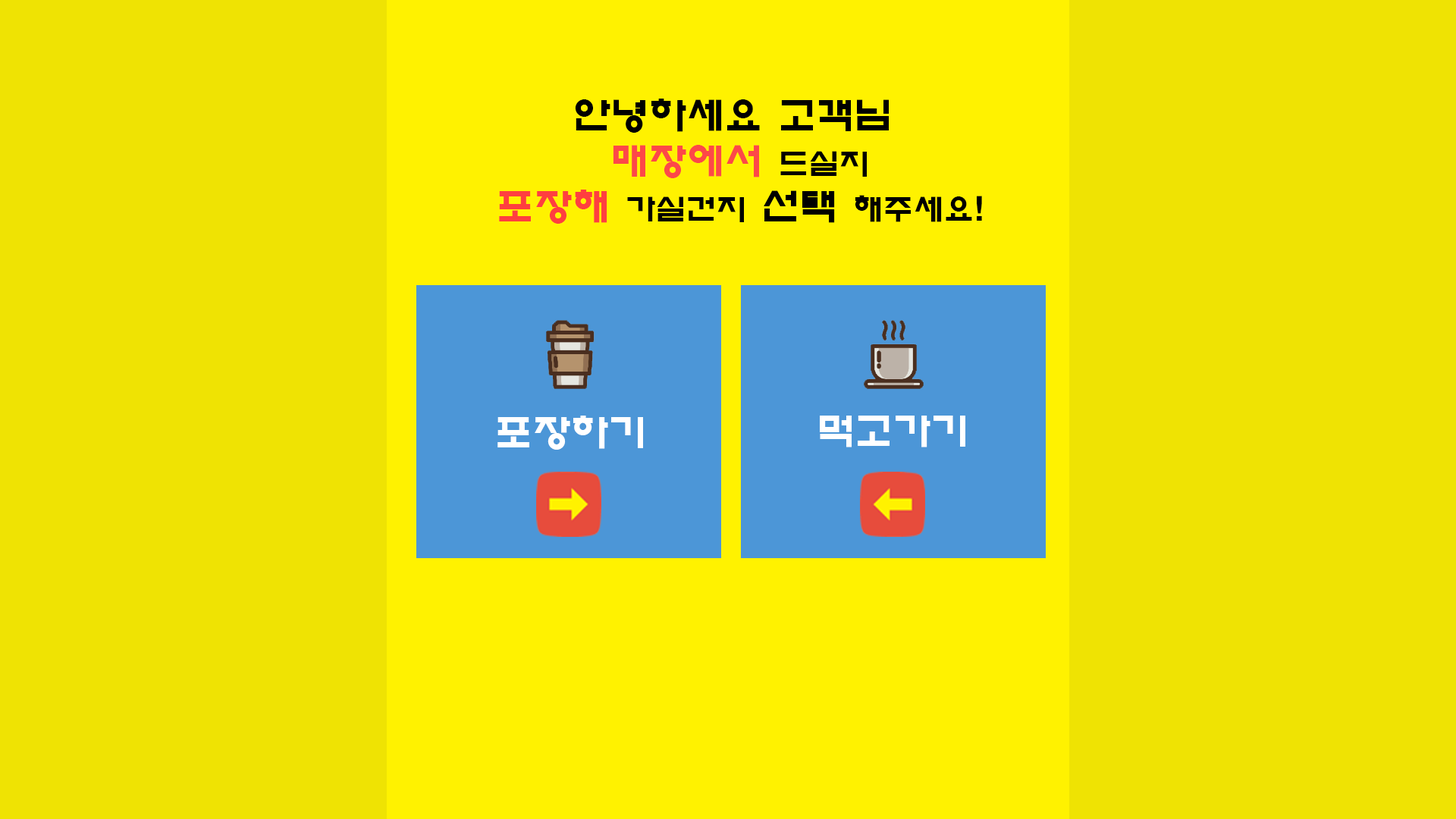
<style>
.page{position:relative;width:1456px;height:819px;background:#efe303}
.page>*{position:absolute;margin:0}
.t1{font:37.9px "ExpoB-HM";color:#000000}
.t2{font:37.9px "ExpoB-HM";color:#fd4848}
.t3{font:30.3px "ExpoB-HM";color:#000000}
.t4{font:37.9px "ExpoB-HM";color:#ff3f3f}
.t5{font:37.9px "ExpoB-HM";color:#ffffff}
</style>
<div class="page">
<p class="t1" style="left:499px;top:99px;width:483px;height:125px;text-align:center">안녕하세요 고객님 <br><span class="t2">매장에서 </span><span class="t3">드실지<br></span><span class="t4">포장해 </span><span class="t3">가실건지</span> 선택 <span class="t3">해주세요!</span></p>
<p class="t5" style="left:497px;top:416px;width:146px;height:34px">포장하기</p>
<p class="t5" style="left:820px;top:416px;width:145px;height:31px">먹고가기</p>
</div>
